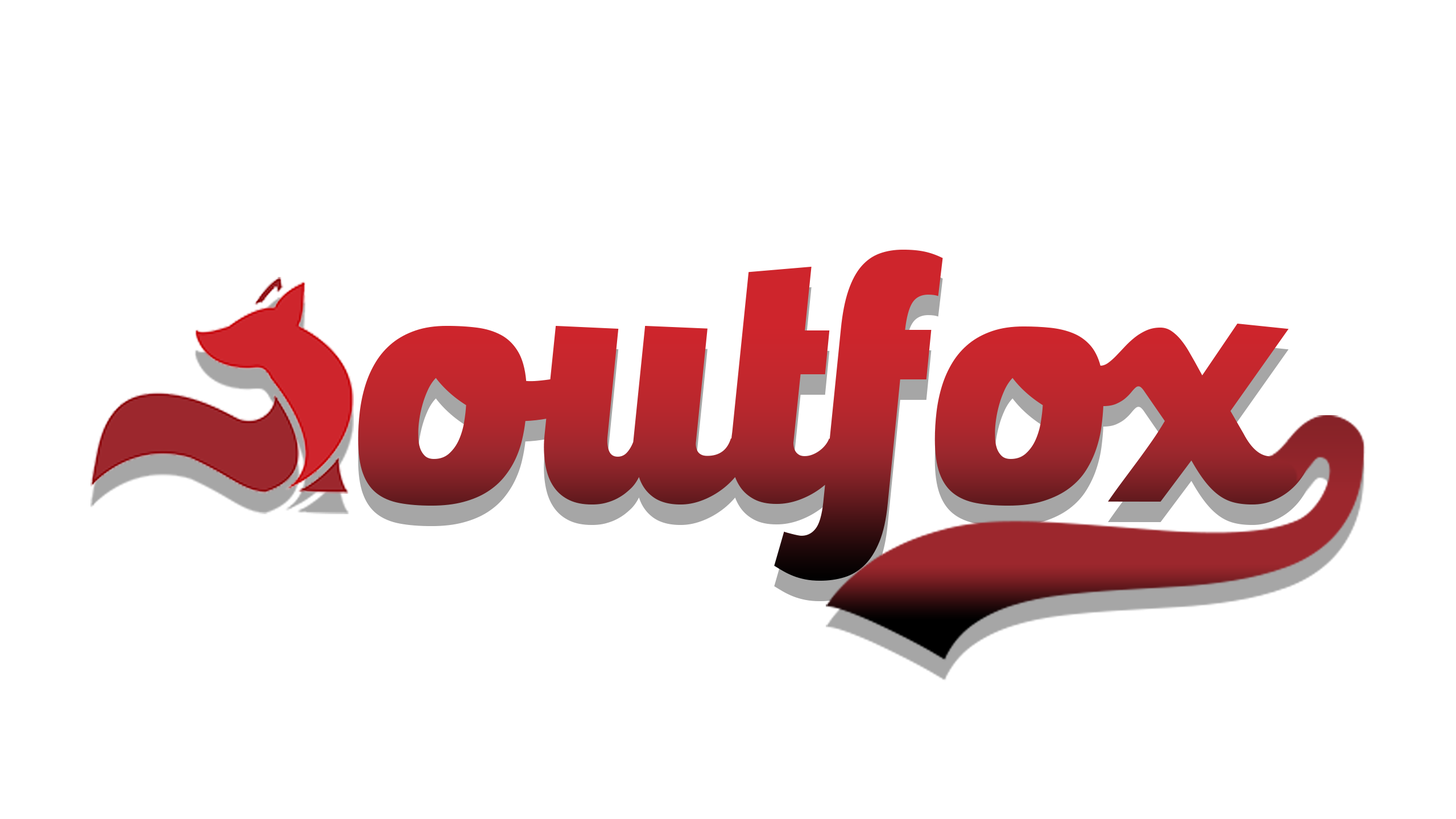
<style>
.page{position:relative;width:1456px;height:819px;background:#ffffff}
.page>*{position:absolute;margin:0}
.t1{font:327.3px "BullettoKilla"}
</style>
<div class="page">
<p class="t1" style="left:358px;top:250px;width:952px;height:331px">outfox</p>
</div>
